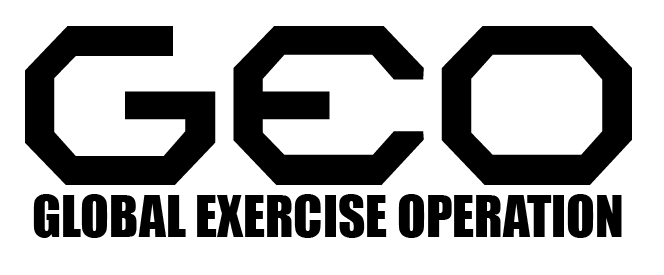
<style>
.page{position:relative;width:664px;height:275px;background:#ffffff}
.page>*{position:absolute;margin:0}
.t1{font:53px "Impact";color:#000000}
</style>
<div class="page">
<p class="t1" style="left:33px;top:194px;width:589px;height:44px">GLOBAL EXERCISE OPERATION</p>
</div>
